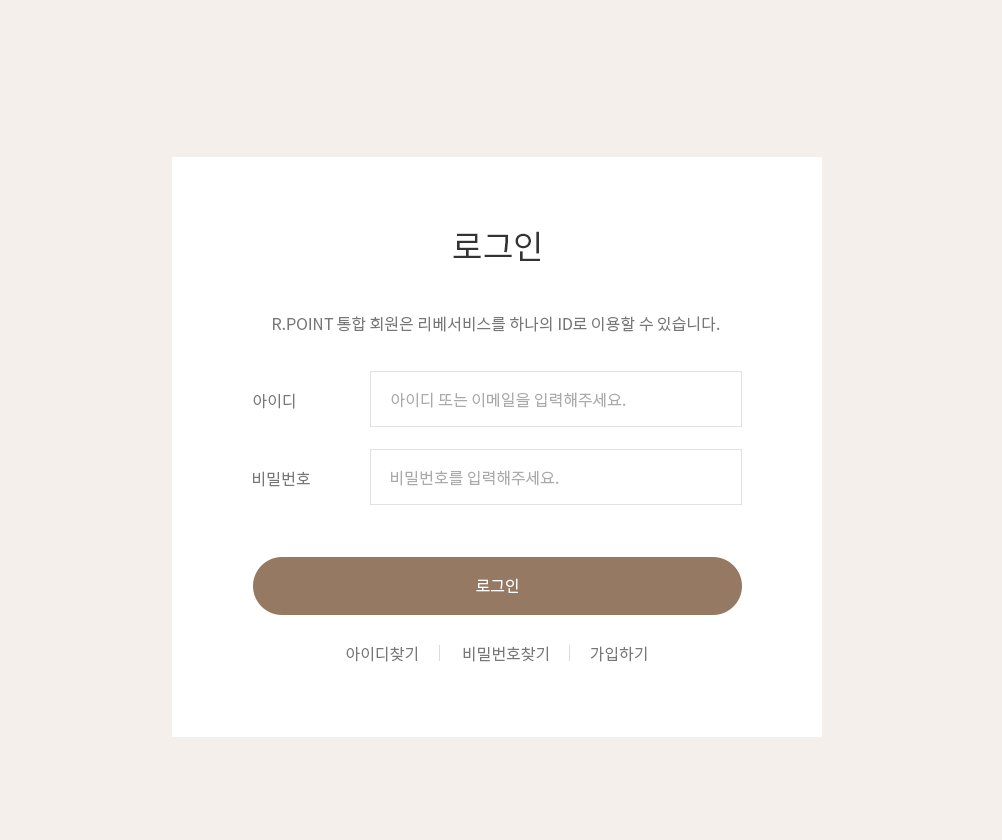
<style>
.page{position:relative;width:1002px;height:840px;background:#f4efeb}
.page>*{position:absolute;margin:0}
.t1{font:33.3px "NotoSansCJKkr-Regular";color:#333333}
.t2{font:16px "NotoSansCJKkr-DemiLight";color:#777777}
.t3{font:16px "NotoSansCJKkr-DemiLight";color:#aaaaaa}
.t4{font:16px "NotoSansCJKkr-DemiLight";color:#ffffff}
</style>
<div class="page">
<p class="t1" style="left:453px;top:231px;width:87px;height:30px">로그인</p>
<p class="t2" style="left:273px;top:316px;width:447px;height:16px">R.POINT 통합 회원은 리베서비스를 하나의 ID로 이용할 수 있습니다.</p>
<p class="t2" style="left:253px;top:393px;width:42px;height:16px">아이디</p>
<p class="t3" style="left:391px;top:392px;width:235px;height:16px">아이디 또는 이메일을 입력해주세요.</p>
<p class="t2" style="left:253px;top:471px;width:57px;height:16px">비밀번호</p>
<p class="t3" style="left:391px;top:470px;width:168px;height:16px">비밀번호를 입력해주세요.</p>
<p class="t4" style="left:476px;top:578px;width:42px;height:15px">로그인</p>
<p class="t2" style="left:346px;top:646px;width:301px;height:16px">아이디찾기            비밀번호찾기           가입하기</p>
</div>
